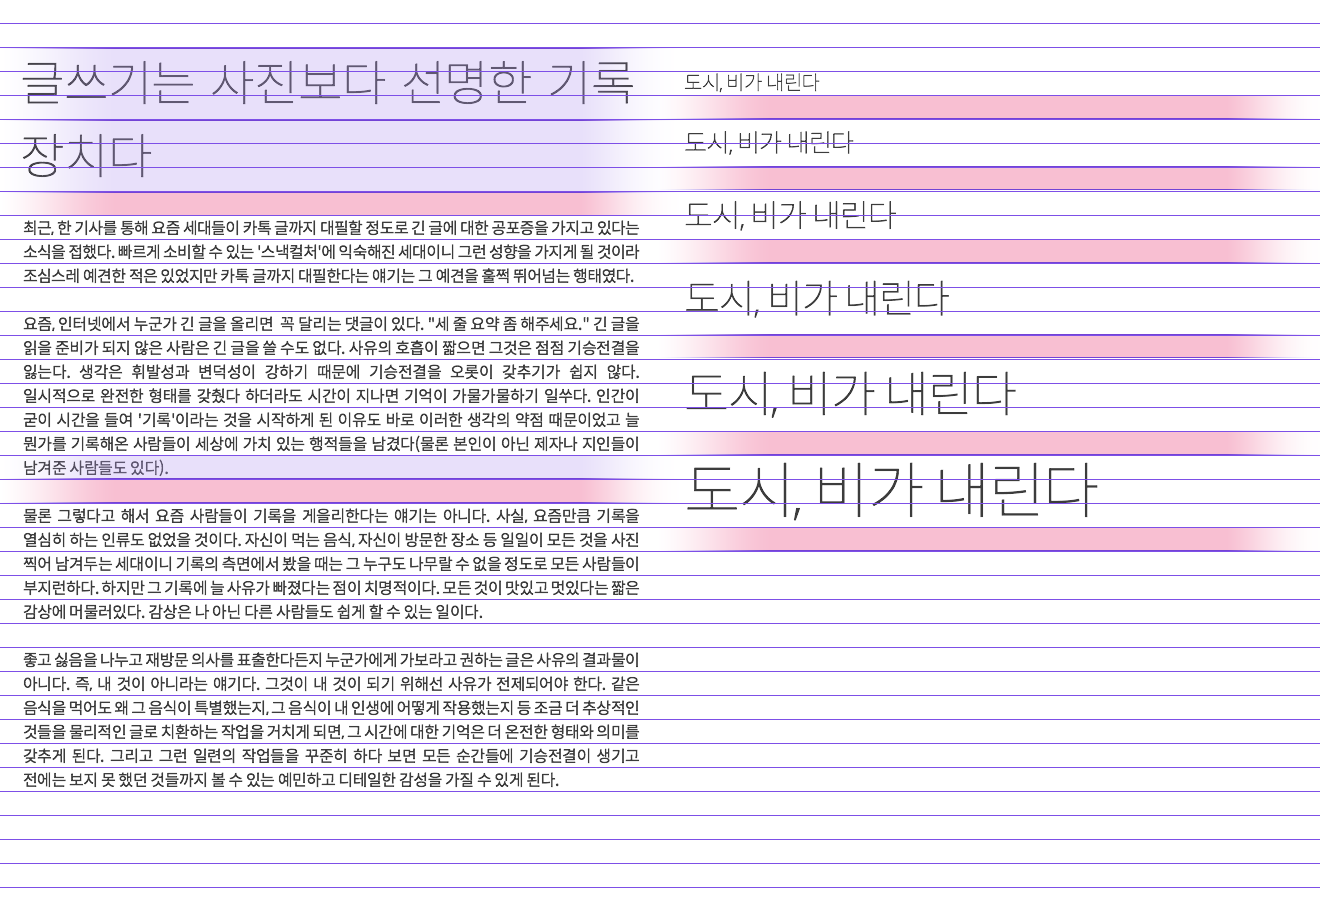
<style>
.page{position:relative;width:1320px;height:900px;background:#ffffff}
.page>*{position:absolute;margin:0}
.t1{font:48.4px "SpoqaHanSans-Thin";letter-spacing:-0.025em;color:#605872}
.t2{font:20px "SpoqaHanSans-Thin";letter-spacing:-0.025em;color:#3c3c3c}
.t3{font:25px "SpoqaHanSans-Thin";letter-spacing:-0.025em;color:#3c3c3c}
.t4{font:31.2px "SpoqaHanSans-Thin";letter-spacing:-0.025em;color:#3c3c3c}
.t5{font:16px "SpoqaHanSans-Regular";letter-spacing:-0.025em;color:#3c3c3c}
.t6{font:39.1px "SpoqaHanSans-Thin";letter-spacing:-0.025em;color:#3c3c3c}
.t7{font:48.8px "SpoqaHanSans-Thin";letter-spacing:-0.025em;color:#3c3c3c}
.t8{font:61px "SpoqaHanSans-Thin";letter-spacing:-0.025em;color:#3c3c3c}
</style>
<div class="page">
<p class="t1" style="left:22px;top:60px;width:611px;height:118px;text-align:justify">글쓰기는 사진보다 선명한 기록 장치다</p>
<p class="t2" style="left:684px;top:73px;width:136px;height:20px">도시, 비가 내린다</p>
<p class="t3" style="left:685px;top:131px;width:169px;height:24px">도시, 비가 내린다</p>
<p class="t4" style="left:685px;top:200px;width:211px;height:31px">도시, 비가 내린다</p>
<p class="t5" style="left:23px;top:220px;width:617px;height:568px;text-align:justify">최근, 한 기사를 통해 요즘 세대들이 카톡 글까지 대필할 정도로 긴 글에 대한 공포증을 가지고 있다는 소식을 접했다. 빠르게 소비할 수 있는 '스낵컬처'에 익숙해진 세대이니 그런 성향을 가지게 될 것이라 조심스레 예견한 적은 있었지만 카톡 글까지 대필한다는 얘기는 그 예견을 훌쩍 뛰어넘는 행태였다.<br>요즘, 인터넷에서 누군가 긴 글을 올리면  꼭 달리는 댓글이 있다. "세 줄 요약 좀 해주세요." 긴 글을 읽을 준비가 되지 않은 사람은 긴 글을 쓸 수도 없다. 사유의 호흡이 짧으면 그것은 점점 기승전결을 잃는다. 생각은 휘발성과 변덕성이 강하기 때문에 기승전결을 오롯이 갖추기가 쉽지 않다. 일시적으로 완전한 형태를 갖췄다 하더라도 시간이 지나면 기억이 가물가물하기 일쑤다. 인간이 굳이 시간을 들여 '기록'이라는 것을 시작하게 된 이유도 바로 이러한 생각의 약점 때문이었고 늘 뭔가를 기록해온 사람들이 세상에 가치 있는 행적들을 남겼다(물론 본인이 아닌 제자나 지인들이 남겨준 사람들도 있다). <br>물론 그렇다고 해서 요즘 사람들이 기록을 게을리한다는 얘기는 아니다. 사실, 요즘만큼 기록을 열심히 하는 인류도 없었을 것이다. 자신이 먹는 음식, 자신이 방문한 장소 등 일일이 모든 것을 사진 찍어 남겨두는 세대이니 기록의 측면에서 봤을 때는 그 누구도 나무랄 수 없을 정도로 모든 사람들이 부지런하다. 하지만 그 기록에 늘 사유가 빠졌다는 점이 치명적이다. 모든 것이 맛있고 멋있다는 짧은 감상에 머물러있다. 감상은 나 아닌 다른 사람들도 쉽게 할 수 있는 일이다. <br>좋고 싫음을 나누고 재방문 의사를 표출한다든지 누군가에게 가보라고 권하는 글은 사유의 결과물이 아니다. 즉, 내 것이 아니라는 얘기다. 그것이 내 것이 되기 위해선 사유가 전제되어야 한다. 같은 음식을 먹어도 왜 그 음식이 특별했는지, 그 음식이 내 인생에 어떻게 작용했는지 등 조금 더 추상적인 것들을 물리적인 글로 치환하는 작업을 거치게 되면, 그 시간에 대한 기억은 더 온전한 형태와 의미를 갖추게 된다. 그리고 그런 일련의 작업들을 꾸준히 하다 보면 모든 순간들에 기승전결이 생기고 전에는 보지 못 했던 것들까지 볼 수 있는 예민하고 디테일한 감성을 가질 수 있게 된다.</p>
<p class="t6" style="left:686px;top:280px;width:263px;height:38px">도시, 비가 내린다</p>
<p class="t7" style="left:686px;top:371px;width:330px;height:47px">도시, 비가 내린다</p>
<p class="t8" style="left:687px;top:462px;width:411px;height:59px">도시, 비가 내린다</p>
</div>
